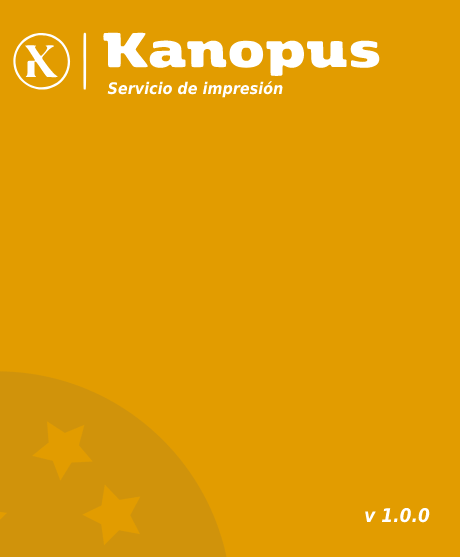
<style>
.page{position:relative;width:460px;height:557px;background:#e29c00}
.page>*{position:absolute;margin:0}
.t1{font:16px "DejaVuSansCondensed-BoldOblique";color:#ffffff}
.t2{font:19px "DejaVuSansCondensed-BoldOblique";color:#ffffff}
</style>
<div class="page">
<p class="t1" style="left:107px;top:81px;width:176px;height:17px">Servicio de impresión</p>
<p class="t2" style="left:365px;top:507px;width:65px;height:16px">v 1.0.0</p>
</div>
